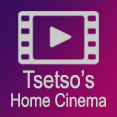
<style>
.page{position:relative;width:117px;height:117px}
.page>*{position:absolute;margin:0}
.t1{font:24.3px "ArialNarrow";color:#c9c9c9}
.t2{font:18.5px "ArialNarrow";color:#c9c9c9}
</style>
<div class="page">
<p class="t1" style="left:23px;top:70px;width:72px;height:19px">Tsetso’s</p>
<p class="t2" style="left:11px;top:93px;width:96px;height:14px">Home Cinema</p>
</div>
